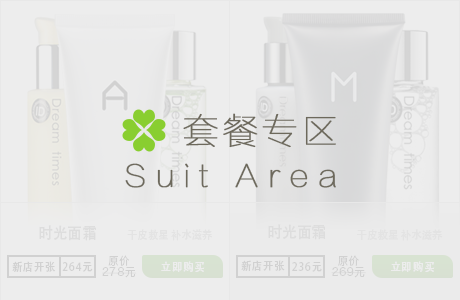
<style>
.page{position:relative;width:460px;height:300px;background:#ededed}
.page>*{position:absolute;margin:0}
.t1{font:36px "FZLTCXHJW--GB1-0";letter-spacing:0.075em;color:#6d695c;font-weight:bold}
.t2{font:30px "FZLTCXHJW--GB1-0";letter-spacing:0.275em;color:#6d695c;font-weight:bold}
.t3{font:16px "AdobeHeitiStd-Regular";color:#dddddd;scale:0.92 1}
.t4{font:11.2px "AdobeHeitiStd-Regular";color:#e3e3e3;scale:0.92 1}
.t5{font:16px "AdobeHeitiStd-Regular";color:#dddddd;scale:0.93 1}
.t6{font:11.2px "AdobeHeitiStd-Regular";color:#e3e3e3;scale:0.93 1}
.t7{font:11.2px "HiraginoSansGB-W3";letter-spacing:0.075em;color:#d1d1d1;scale:0.92 1}
.t8{font:11.2px "HiraginoSansGB-W3";letter-spacing:0.075em;color:#d1d1d1;scale:0.93 1}
.t9{font:11.2px "AdobeHeitiStd-Regular";letter-spacing:0.075em;color:#d1d1d1;scale:0.92 1}
.t10{font:11.2px "AdobeHeitiStd-Regular";letter-spacing:0.075em;color:#ffffff;scale:0.92 1}
.t11{font:11.2px "AdobeHeitiStd-Regular";letter-spacing:0.075em;color:#d1d1d1;scale:0.93 1}
.t12{font:11.2px "AdobeHeitiStd-Regular";letter-spacing:0.075em;color:#ffffff;scale:0.93 1}
</style>
<div class="page">
<p class="t1" style="left:183px;top:113px;width:153px;height:35px">套餐专区</p>
<p class="t2" style="left:125px;top:163px;width:211px;height:25px">Suit Area</p>
<p class="t3" style="left:39px;top:225px;width:57px;height:16px">时光面霜</p>
<p class="t4" style="left:127px;top:229px;width:86px;height:12px">干皮救星 补水滋养</p>
<p class="t5" style="left:268px;top:224px;width:58px;height:16px">时光面霜</p>
<p class="t6" style="left:357px;top:229px;width:86px;height:12px">干皮救星 补水滋养</p>
<p class="t7" style="left:108px;top:255px;width:21px;height:11px">原价</p>
<p class="t8" style="left:338px;top:255px;width:21px;height:11px">原价</p>
<p class="t9" style="left:12px;top:261px;width:44px;height:11px">新店开张</p>
<p class="t9" style="left:62px;top:262px;width:31px;height:10px">264元</p>
<p class="t7" style="left:102px;top:267px;width:35px;height:11px">278元</p>
<p class="t10" style="left:161px;top:261px;width:44px;height:11px">立即购买</p>
<p class="t11" style="left:241px;top:260px;width:44px;height:11px">新店开张</p>
<p class="t11" style="left:292px;top:262px;width:30px;height:10px">236元</p>
<p class="t8" style="left:331px;top:267px;width:35px;height:11px">269元</p>
<p class="t12" style="left:391px;top:261px;width:44px;height:11px">立即购买</p>
</div>
